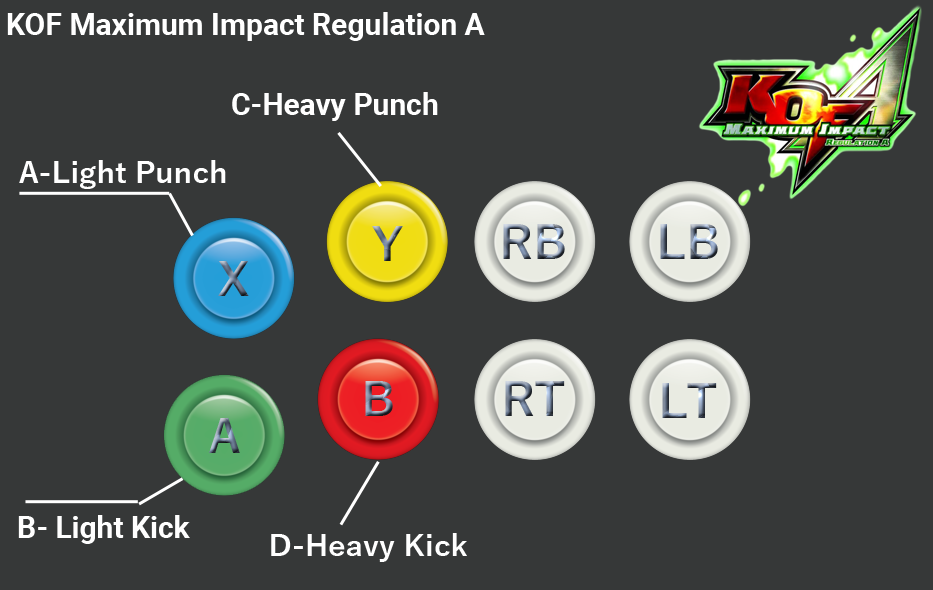
<style>
.page{position:relative;width:933px;height:590px;background:#363838}
.page>*{position:absolute;margin:0}
.t1{font:30px "Roboto-Bold";color:#ffffff}
.t2{font:30px "YuGothic-Bold";color:#ffffff}
</style>
<div class="page">
<p class="t1" style="left:7px;top:12px;width:478px;height:29px">KOF Maximum Impact Regulation A</p>
<p class="t1" style="left:232px;top:92px;width:206px;height:29px">C-Heavy Punch</p>
<p class="t2" style="left:19px;top:160px;width:207px;height:29px">A-Light Punch</p>
<p class="t1" style="left:18px;top:515px;width:172px;height:29px">B- Light Kick</p>
<p class="t2" style="left:271px;top:533px;width:196px;height:29px">D-Heavy Kick</p>
</div>
